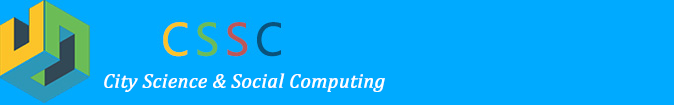
<style>
.page{position:relative;width:674px;height:105px;background:#00aaff}
.page>*{position:absolute;margin:0}
.t1{font:20px "Cambria-Italic";color:#ffffff;font-weight:bold}
</style>
<div class="page">
<p class="t1" style="left:104px;top:73px;width:281px;height:19px">City Science &amp; Social Computing</p>
</div>
